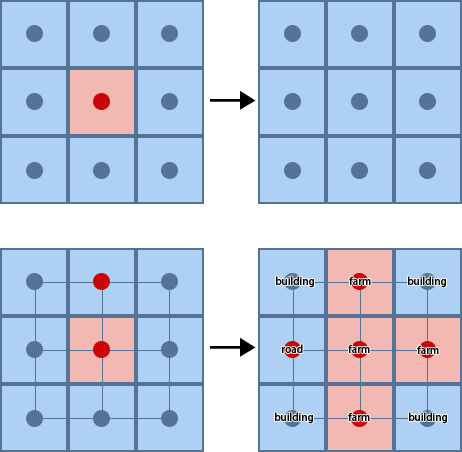
<style>
.page{position:relative;width:462px;height:452px;background:#aed0f4}
.page>*{position:absolute;margin:0}
.t1{font:50px "AdobeHeitiStd-Regular";color:#000000}
.t2{font:10.3px "AdobeHeitiStd-Regular";color:#000000}
</style>
<div class="page">
<p class="t1" style="left:210px;top:90px;width:46px;height:20px">→</p>
<p class="t2" style="left:276px;top:276px;width:38px;height:12px">building</p>
<p class="t2" style="left:349px;top:276px;width:22px;height:9px">farm</p>
<p class="t2" style="left:408px;top:276px;width:38px;height:12px">building</p>
<p class="t1" style="left:210px;top:337px;width:46px;height:20px">→</p>
<p class="t2" style="left:282px;top:344px;width:21px;height:9px">road</p>
<p class="t2" style="left:348px;top:344px;width:22px;height:9px">farm</p>
<p class="t2" style="left:417px;top:345px;width:22px;height:9px">farm</p>
<p class="t2" style="left:275px;top:412px;width:38px;height:12px">building</p>
<p class="t2" style="left:348px;top:412px;width:22px;height:9px">farm</p>
<p class="t2" style="left:409px;top:412px;width:38px;height:12px">building</p>
</div>
